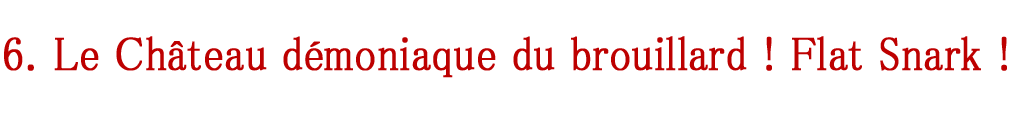
<style>
.page{position:relative;width:1009px;height:113px;background:#ffffff}
.page>*{position:absolute;margin:0}
.t1{font:47.6px "MS-PMincho";color:#bd0000;font-weight:bold;scale:0.89 1}
</style>
<div class="page">
<p class="t1" style="left:4px;top:36px;width:1003px;height:42px">6. Le Château démoniaque du brouillard ! Flat Snark !</p>
</div>
